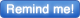
<style>
.page{position:relative;width:80px;height:18px}
.page>*{position:absolute;margin:0}
.t1{font:12px "Helvetica";color:#ffffff;font-weight:bold}
</style>
<div class="page">
<p class="t1" style="left:7px;top:4px;width:67px;height:10px">Remind me!</p>
</div>
